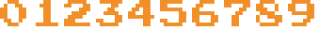
<style>
.page{position:relative;width:320px;height:32px;background:#ffffff}
.page>*{position:absolute;margin:0}
.t1{font:30px "PressStart2P";color:#f19029}
</style>
<div class="page">
<p class="t1" style="left:0px;top:0px;width:27px;height:27px">0</p>
<p class="t1" style="left:35px;top:0px;width:24px;height:27px">1</p>
<p class="t1" style="left:64px;top:0px;width:27px;height:27px">2</p>
<p class="t1" style="left:96px;top:0px;width:27px;height:27px">3</p>
<p class="t1" style="left:128px;top:0px;width:27px;height:27px">4</p>
<p class="t1" style="left:160px;top:0px;width:27px;height:27px">5</p>
<p class="t1" style="left:192px;top:0px;width:27px;height:27px">6</p>
<p class="t1" style="left:224px;top:0px;width:27px;height:27px">7</p>
<p class="t1" style="left:256px;top:0px;width:27px;height:27px">8</p>
<p class="t1" style="left:288px;top:0px;width:27px;height:27px">9</p>
</div>
